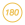
<style>
.page{position:relative;width:25px;height:25px;background:#ffffff}
.page>*{position:absolute;margin:0}
.t1{font:8px "HelveticaNeue-LightItalic";color:#edc051;font-weight:bold}
</style>
<div class="page">
<p class="t1" style="left:6px;top:9px;width:13px;height:7px">180</p>
</div>
